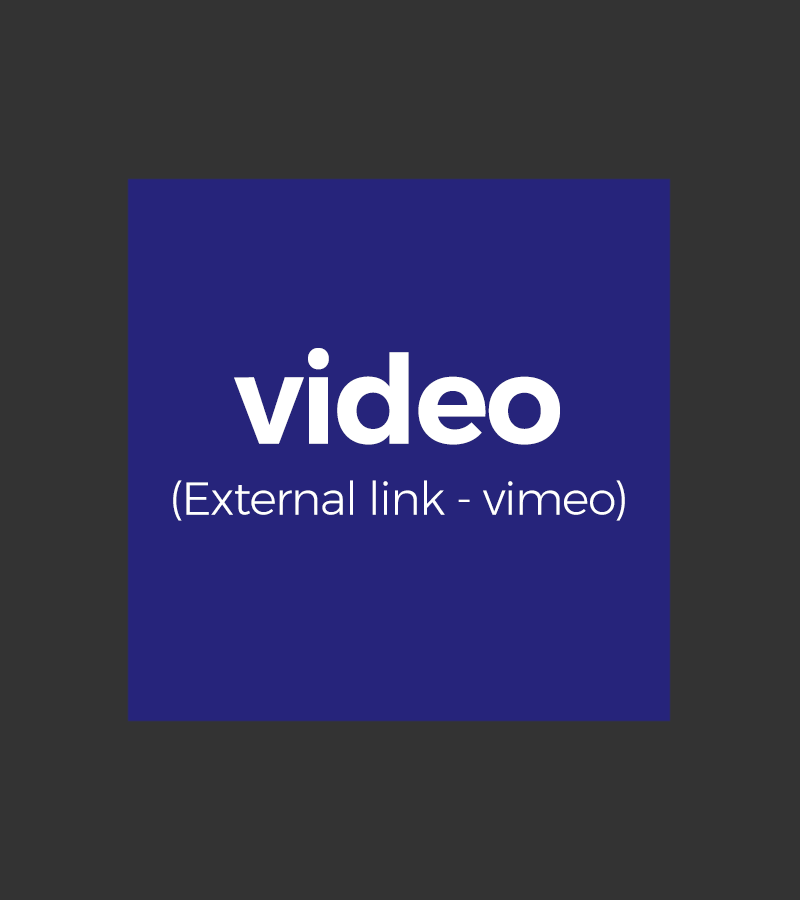
<style>
.page{position:relative;width:800px;height:900px;background:#333333}
.page>*{position:absolute;margin:0}
.t1{font:46px/71px "Montserrat-Light";letter-spacing:-0.025em;color:#ffffff}
.t2{font:123px/71px "Montserrat-SemiBold";letter-spacing:-0.025em;color:#ffffff}
</style>
<div class="page">
<p class="t1" style="left:173px;top:348px;width:452px;height:173px;text-align:center"><span class="t2">video<br></span>(External link - vimeo)</p>
</div>
